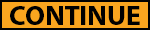
<style>
.page{position:relative;width:150px;height:30px;background:#f9a51f}
.page>*{position:absolute;margin:0}
.t1{font:28px "MyriadPro-Bold";color:#000000}
</style>
<div class="page">
<p class="t1" style="left:10px;top:6px;width:130px;height:19px">CONTINUE</p>
</div>
